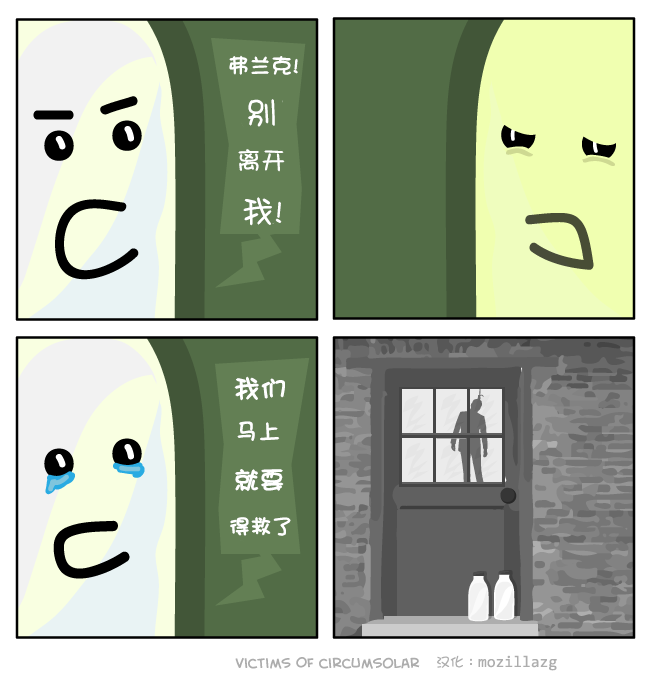
<style>
.page{position:relative;width:650px;height:680px}
.page>*{position:absolute;margin:0}
.t1{font:21px "DFGirl";color:#ffffff;font-weight:bold}
.t2{font:32px "DFGirl";color:#ffffff}
.t3{font:25px "DFGirl";color:#ffffff}
.t4{font:26px "DFGirl";color:#ffffff;font-weight:bold}
.t5{font:22px "DFGirl";color:#fefefe;font-weight:bold}
.t6{font:25px "DFGirl";color:#ffffff;font-weight:bold}
</style>
<div class="page">
<p class="t1" style="left:229px;top:55px;width:69px;height:20px">弗兰克!</p>
<p class="t2" style="left:248px;top:99px;width:27px;height:28px">别</p>
<p class="t3" style="left:238px;top:149px;width:47px;height:23px">离开</p>
<p class="t2" style="left:243px;top:197px;width:39px;height:29px">我!</p>
<p class="t4" style="left:234px;top:376px;width:51px;height:25px">我们</p>
<p class="t5" style="left:237px;top:421px;width:43px;height:20px">马上</p>
<p class="t6" style="left:235px;top:469px;width:49px;height:22px">就要</p>
<p class="t1" style="left:230px;top:517px;width:61px;height:19px">得救了</p>
</div>
